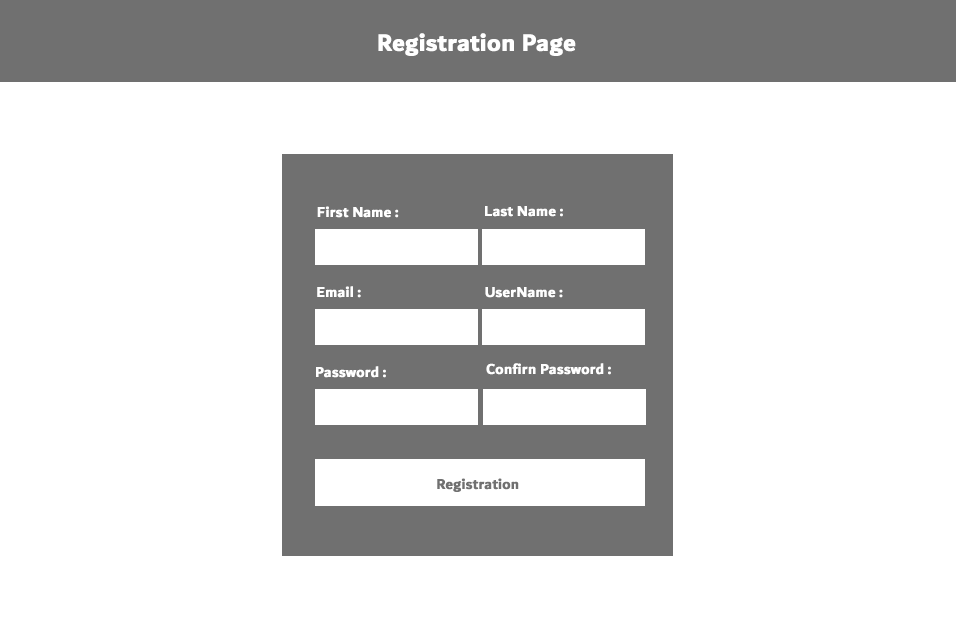
<style>
.page{position:relative;width:956px;height:637px;background:#ffffff}
.page>*{position:absolute;margin:0}
.t1{font:25px "DubaiW23-Bold";color:#ffffff;font-weight:bold}
.t2{font:15px "DubaiW23-Bold";color:#ffffff;font-weight:bold}
.t3{font:15px "DubaiW23-Bold";color:#707070;font-weight:bold}
</style>
<div class="page">
<p class="t1" style="left:378px;top:33px;width:198px;height:23px">Registration Page</p>
<p class="t2" style="left:317px;top:206px;width:82px;height:12px">First Name :</p>
<p class="t2" style="left:485px;top:206px;width:78px;height:11px">Last Name :</p>
<p class="t2" style="left:317px;top:286px;width:44px;height:12px">Email :</p>
<p class="t2" style="left:485px;top:287px;width:78px;height:11px">UserName :</p>
<p class="t2" style="left:316px;top:366px;width:70px;height:12px">Password :</p>
<p class="t2" style="left:486px;top:363px;width:125px;height:12px">Confirn Password :</p>
<p class="t3" style="left:437px;top:478px;width:82px;height:14px">Registration</p>
</div>
